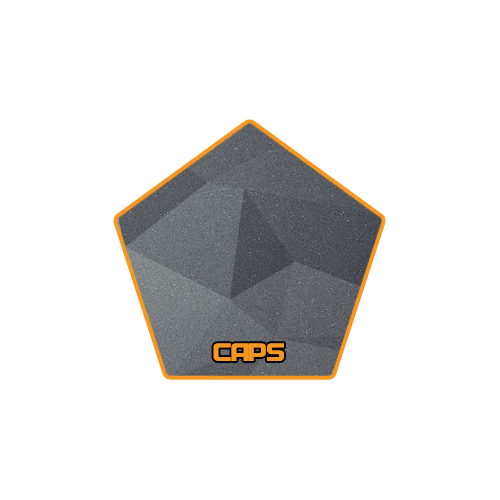
<style>
.page{position:relative;width:500px;height:500px;background:#ffffff}
.page>*{position:absolute;margin:0}
.t1{font:22px "HyundaiNormal";color:#f49720}
</style>
<div class="page">
<p class="t1" style="left:213px;top:343px;width:71px;height:18px">Caps</p>
</div>
